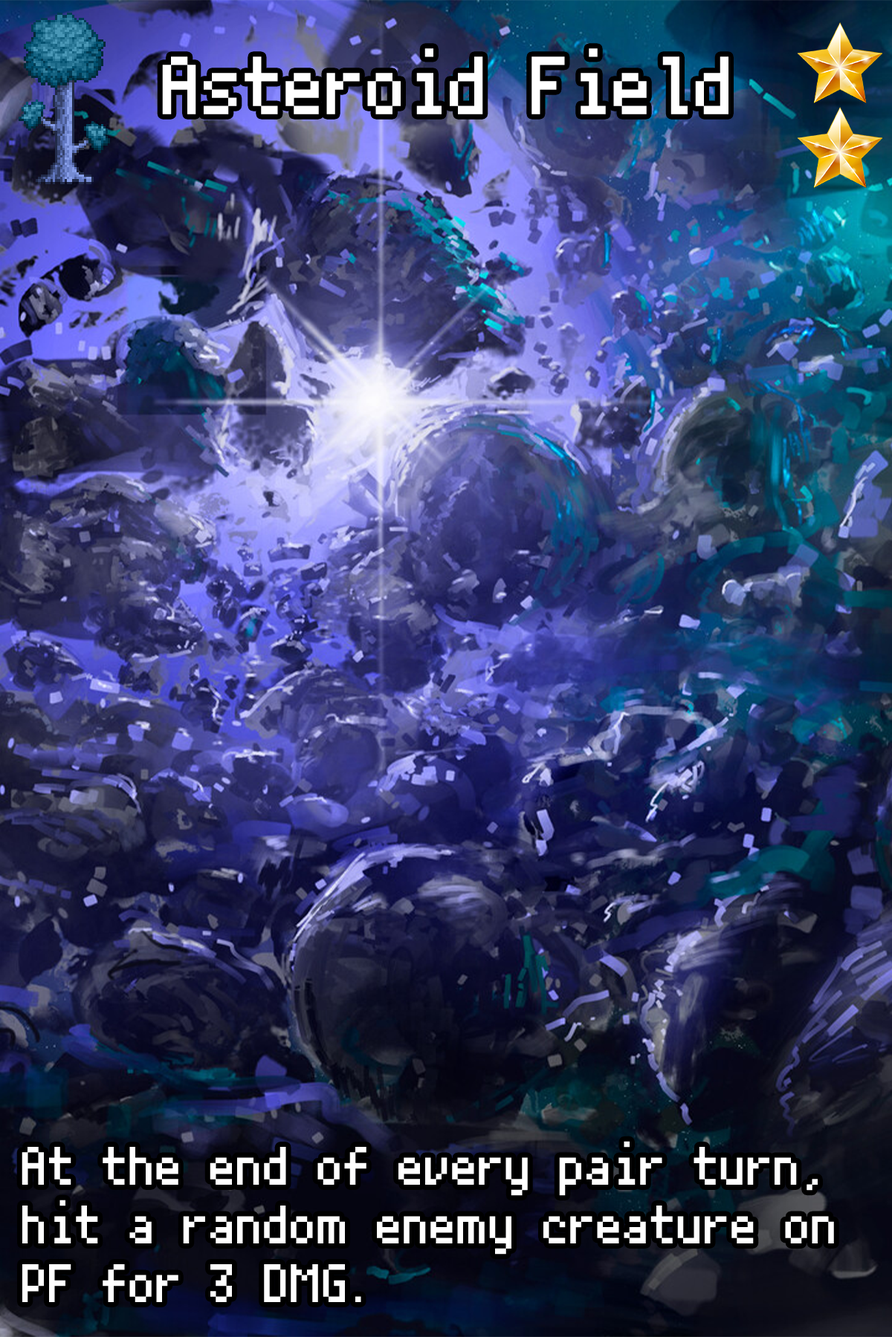
<style>
.page{position:relative;width:892px;height:1337px}
.page>*{position:absolute;margin:0}
.t1{font:140.6px "PixelMplus10-Regular";color:#ffffff}
.t2{font:92.1px/58.7px "PixelMplus10-Regular";color:#ffffff}
</style>
<div class="page">
<p class="t1" style="left:162px;top:48px;width:566px;height:66px">Asteroid Field</p>
<p class="t2" style="left:22px;top:1141px;width:812px;height:161px">At the end of every pair turn, hit a random enemy creature on PF for 3 DMG.</p>
</div>
